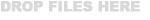
<style>
.page{position:relative;width:150px;height:20px;background:#ffffff}
.page>*{position:absolute;margin:0}
.t1{font:13.5px "Arial-Black";color:#d9d8d9;font-weight:bold}
</style>
<div class="page">
<p class="t1" style="left:1px;top:1px;width:139px;height:11px">DROP FILES HERE</p>
</div>
